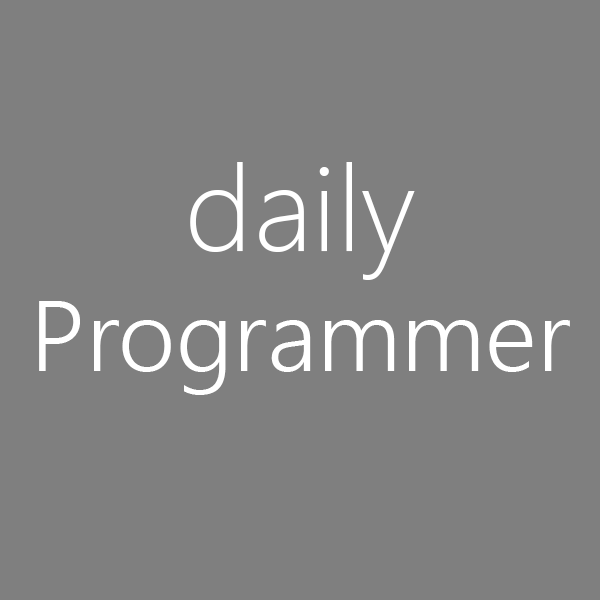
<style>
.page{position:relative;width:600px;height:600px;background:#7f7f7f}
.page>*{position:absolute;margin:0}
.t1{font:100px "SegoeUI-Semilight";color:#ffffff}
.t2{font:120px "SegoeUI-Light";color:#ffffff}
</style>
<div class="page">
<p class="t1" style="left:39px;top:162px;width:531px;height:233px;text-align:center"><span class="t2">daily <br></span>Programmer</p>
</div>
